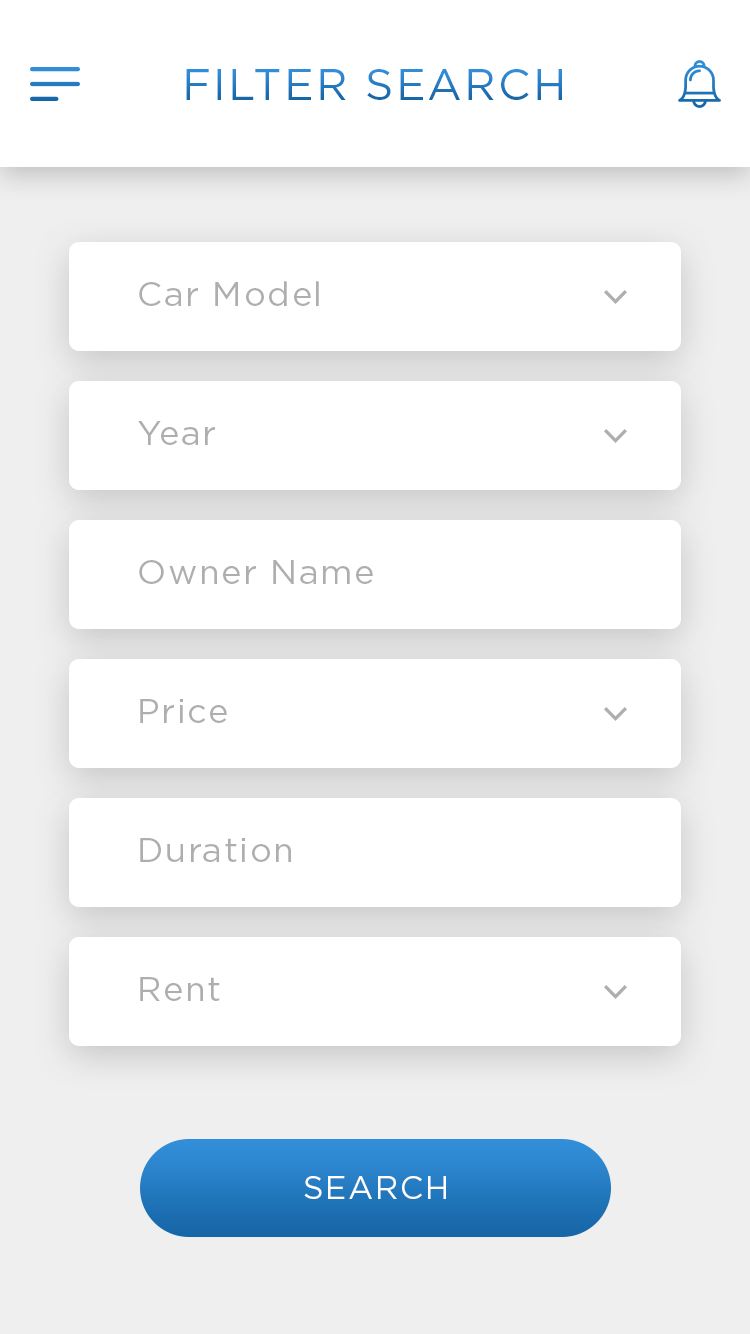
<style>
.page{position:relative;width:750px;height:1334px;background:#ffffff}
.page>*{position:absolute;margin:0}
.t1{font:44px "Gotham-Book";letter-spacing:0.05em;text-transform:uppercase}
.t2{font:34px "Gotham-Book";letter-spacing:0.05em;color:#aeaeae}
.t3{font:32px "Gotham-Book";letter-spacing:0.05em;color:#fefefe;text-transform:uppercase}
</style>
<div class="page">
<p class="t1" style="left:186px;top:69px;width:376px;height:31px">FILTER SEARCH</p>
<p class="t2" style="left:139px;top:281px;width:180px;height:25px">Car Model</p>
<p class="t2" style="left:138px;top:421px;width:77px;height:24px">Year</p>
<p class="t2" style="left:139px;top:560px;width:234px;height:24px">Owner Name</p>
<p class="t2" style="left:140px;top:699px;width:87px;height:24px">Price</p>
<p class="t2" style="left:140px;top:838px;width:151px;height:24px">Duration</p>
<p class="t2" style="left:140px;top:977px;width:80px;height:24px">Rent</p>
<p class="t3" style="left:304px;top:1176px;width:142px;height:23px">SEARCH</p>
</div>
